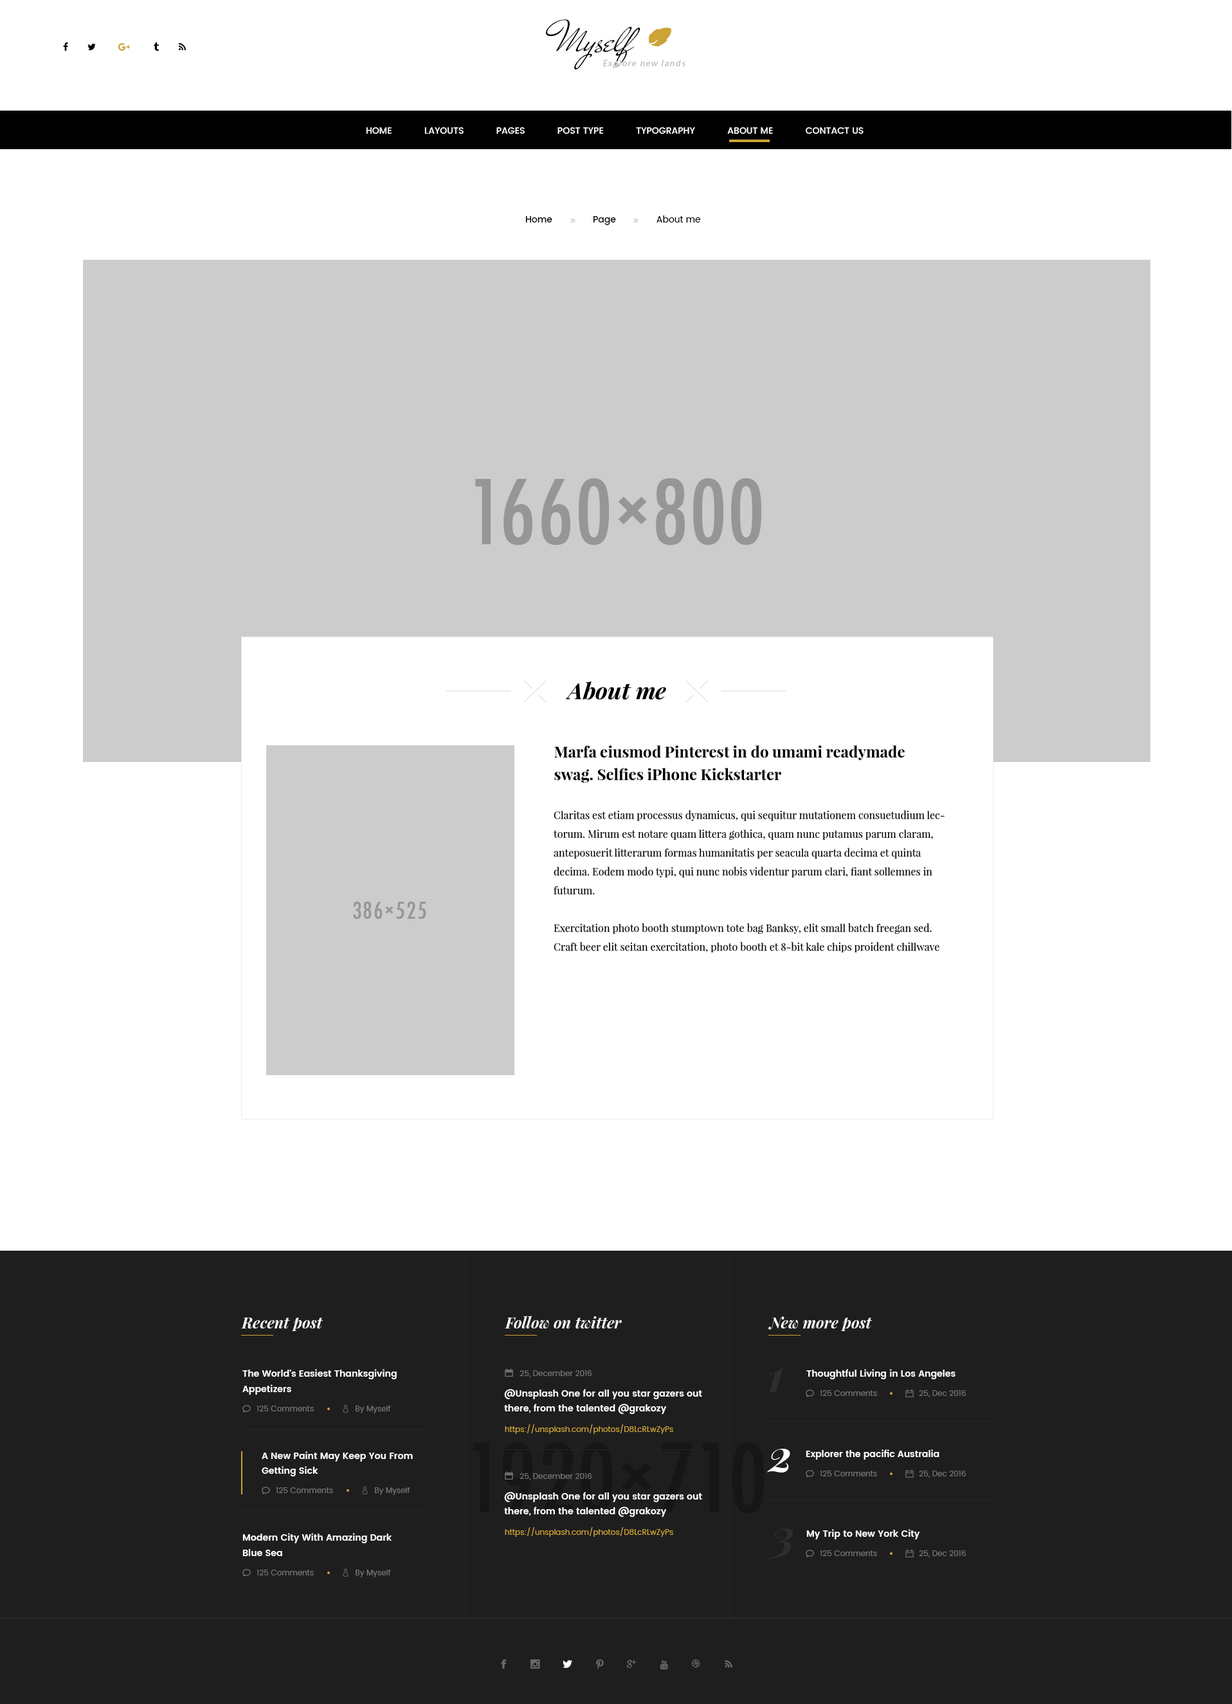
<style>
.page{position:relative;width:1232px;height:1704px;background:#ffffff}
.page>*{position:absolute;margin:0}
.t1{font:45px "MrDeHaviland-Regular";color:#000000}
.t2{font:9px "MyriadPro-Regular";letter-spacing:0.1em;color:#bbbbbb;font-style:italic}
.t3{font:9px "Poppins-Medium";color:#ffffff;text-transform:uppercase}
.t4{font:9px "Poppins-Medium";color:#000000}
.t5{font:9px "Poppins-Regular";color:#000000}
.t6{font:22.6px "PlayfairDisplay-BoldItalic";color:#000000}
.t7{font:15.1px/22.6px "PlayfairDisplay-Bold";color:#000000}
.t8{font:10px/18.8px "PlayfairDisplay-Regular";color:#000000}
.t9{font:15.4px "PlayfairDisplay-BoldItalic";color:#ffffff}
.t10{font:9px/15.4px "Poppins-SemiBold";color:#ffffff}
.t11{font:7.7px "Poppins-Regular";color:#747474}
.t12{font:45px "PlayfairDisplay-BoldItalic";color:#2e2e2e}
.t13{font:9px "Poppins-SemiBold";color:#ffffff}
.t14{font:9px/14.8px "Poppins-SemiBold";color:#ffffff}
.t15{font:7.7px "Poppins-Regular";color:#cca335}
.t16{font:45px "PlayfairDisplay-BoldItalic";color:#ffffff}
</style>
<div class="page">
<p class="t1" style="left:545px;top:19px;width:95px;height:51px">Myself</p>
<p class="t2" style="left:603px;top:60px;width:82px;height:8px">Explore new lands</p>
<p class="t3" style="left:366px;top:127px;width:497px;height:7px">Home            Layouts            Pages            Post type            Typography            About Me            Contact us</p>
<p class="t4" style="left:525px;top:215px;width:176px;height:10px">Home               Page              <span class="t5"> About me</span></p>
<p class="t6" style="left:565px;top:681px;width:101px;height:18px">About me</p>
<p class="t7" style="left:554px;top:744px;width:351px;height:38px">Marfa eiusmod Pinterest in do umami readymade <br>swag. Selfies iPhone Kickstarter</p>
<p class="t8" style="left:554px;top:810px;width:390px;height:142px">Claritas est etiam processus dynamicus, qui sequitur mutationem consuetudium lectorum. Mirum est notare quam littera gothica, quam nunc putamus parum claram, anteposuerit litterarum formas humanitatis per seacula quarta decima et quinta decima. Eodem modo typi, qui nunc nobis videntur parum clari, fiant sollemnes in futurum.<br><br>Exercitation photo booth stumptown tote bag Banksy, elit small batch freegan sed. Craft beer elit seitan exercitation, photo booth et 8-bit kale chips proident chillwave deeplaborum. Aliquip veniam delectus,</p>
<p class="t9" style="left:241px;top:1317px;width:82px;height:14px">Recent post</p>
<p class="t9" style="left:505px;top:1315px;width:117px;height:13px">Follow on twitter</p>
<p class="t9" style="left:768px;top:1316px;width:104px;height:15px">New more post</p>
<p class="t10" style="left:242px;top:1369px;width:155px;height:25px">The World's Easiest Thanksgiving <br>Appetizers</p>
<p class="t11" style="left:519px;top:1370px;width:73px;height:7px">25, December 2016</p>
<p class="t12" style="left:769px;top:1368px;width:14px;height:24px">1</p>
<p class="t13" style="left:806px;top:1369px;width:149px;height:10px">Thoughtful Living in Los Angeles</p>
<p class="t14" style="left:504px;top:1389px;width:198px;height:25px">@Unsplash One for all you star gazers out <br>there, from the talented @grakozy</p>
<p class="t11" style="left:820px;top:1390px;width:57px;height:6px">125 Comments</p>
<p class="t11" style="left:919px;top:1390px;width:47px;height:7px">25, Dec 2016</p>
<p class="t11" style="left:257px;top:1405px;width:57px;height:6px">125 Comments</p>
<p class="t11" style="left:356px;top:1405px;width:35px;height:8px">By Myself</p>
<p class="t15" style="left:505px;top:1424px;width:168px;height:10px">https://unsplash.com/photos/D8LcRLwZyPs</p>
<p class="t14" style="left:262px;top:1451px;width:151px;height:25px">A New Paint May Keep You From<br>Getting Sick</p>
<p class="t16" style="left:767px;top:1448px;width:23px;height:24px">2</p>
<p class="t13" style="left:806px;top:1449px;width:133px;height:10px">Explorer the pacific Australia</p>
<p class="t11" style="left:519px;top:1473px;width:73px;height:7px">25, December 2016</p>
<p class="t11" style="left:820px;top:1470px;width:57px;height:6px">125 Comments</p>
<p class="t11" style="left:919px;top:1470px;width:47px;height:7px">25, Dec 2016</p>
<p class="t11" style="left:276px;top:1487px;width:57px;height:6px">125 Comments</p>
<p class="t11" style="left:375px;top:1487px;width:35px;height:8px">By Myself</p>
<p class="t14" style="left:504px;top:1492px;width:198px;height:25px">@Unsplash One for all you star gazers out <br>there, from the talented @grakozy</p>
<p class="t15" style="left:505px;top:1527px;width:168px;height:10px">https://unsplash.com/photos/D8LcRLwZyPs</p>
<p class="t12" style="left:767px;top:1528px;width:26px;height:31px">3</p>
<p class="t13" style="left:806px;top:1529px;width:114px;height:10px">My Trip to New York City</p>
<p class="t10" style="left:242px;top:1533px;width:150px;height:23px">Modern City With Amazing Dark <br>Blue Sea</p>
<p class="t11" style="left:820px;top:1550px;width:57px;height:6px">125 Comments</p>
<p class="t11" style="left:919px;top:1550px;width:47px;height:7px">25, Dec 2016</p>
<p class="t11" style="left:257px;top:1569px;width:57px;height:6px">125 Comments</p>
<p class="t11" style="left:356px;top:1569px;width:35px;height:8px">By Myself</p>
</div>
